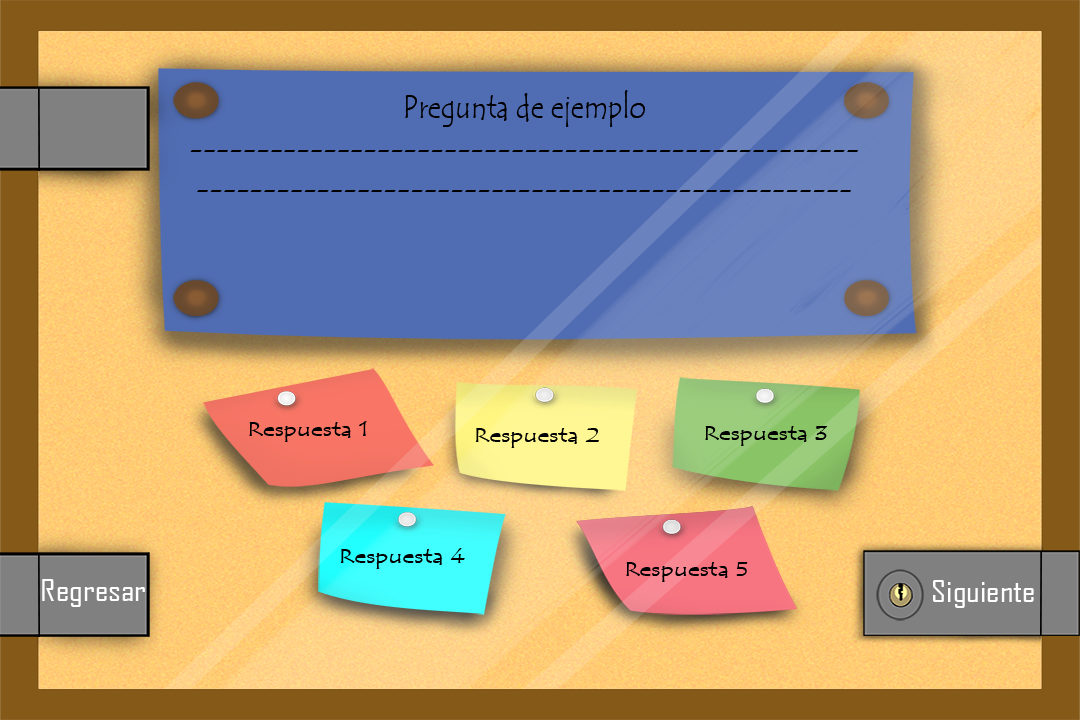
<style>
.page{position:relative;width:1080px;height:720px}
.page>*{position:absolute;margin:0}
.t1{font:33.4px "TempusSansITC";color:#000000;scale:0.84 1}
.t2{font:20.7px "TempusSansITC";color:#000000;scale:1.25 1}
.t3{font:28.8px "AgencyFB-Reg";color:#ffffff;scale:1.25 1}
</style>
<div class="page">
<p class="t1" style="left:190px;top:90px;width:668px;height:102px;text-align:center">Pregunta de ejemplo<br>--------------------------------------------------<br>-------------------------------------------------</p>
<p class="t2" style="left:249px;top:421px;width:118px;height:21px">Respuesta 1</p>
<p class="t2" style="left:475px;top:428px;width:124px;height:20px">Respuesta 2</p>
<p class="t2" style="left:705px;top:426px;width:122px;height:20px">Respuesta 3</p>
<p class="t2" style="left:340px;top:548px;width:125px;height:21px">Respuesta 4</p>
<p class="t2" style="left:626px;top:562px;width:122px;height:20px">Respuesta 5</p>
<p class="t3" style="left:42px;top:579px;width:103px;height:28px">Regresar</p>
<p class="t3" style="left:933px;top:580px;width:101px;height:28px">Siguiente</p>
</div>
